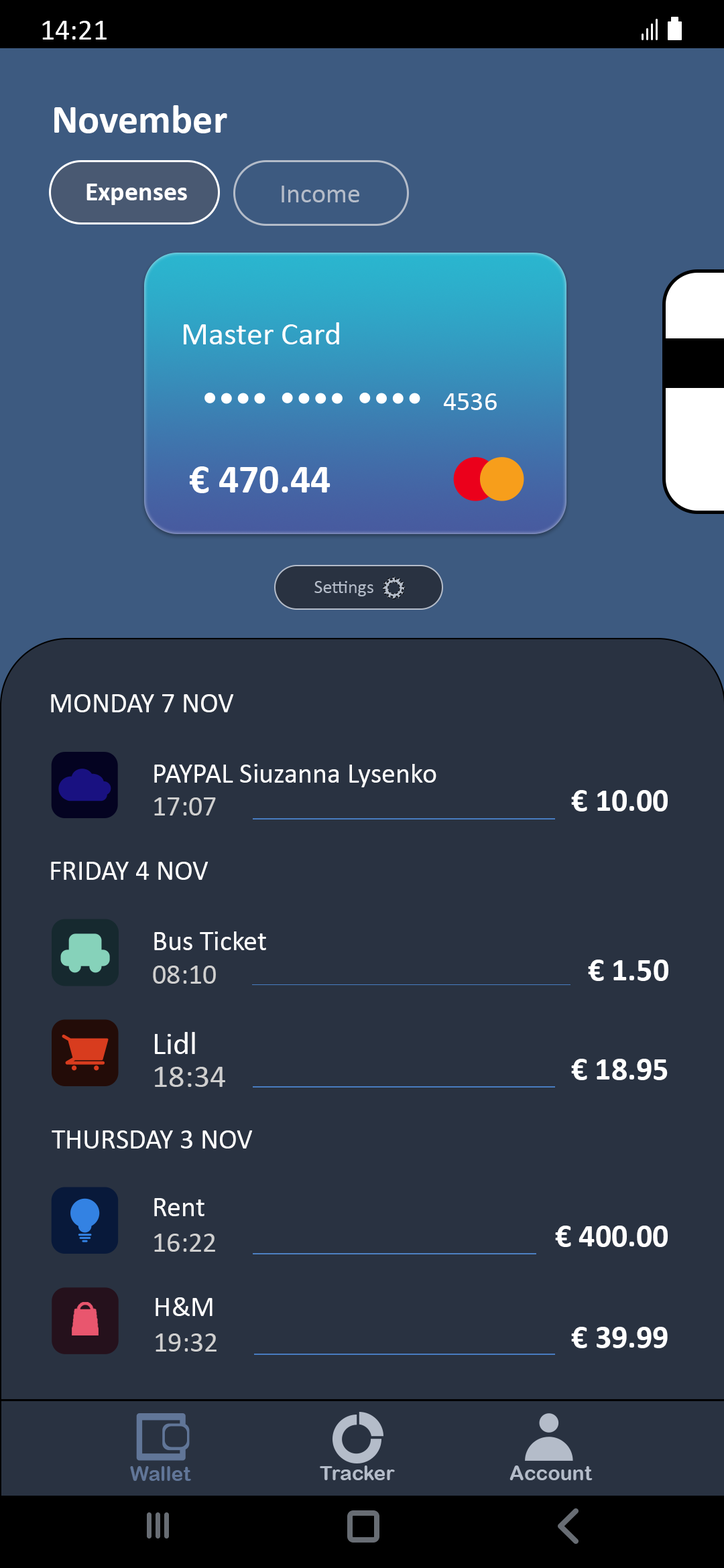
<style>
.page{position:relative;width:724px;height:1568px;background:#293241}
.page>*{position:absolute;margin:0}
.t1{font:29.5px "Calibri";color:#ffffff}
.t2{font:40.2px "Calibri-Bold";color:#ffffff}
.t3{font:26.8px "Calibri-Bold";color:#ffffff}
.t4{font:26.8px "Calibri";color:#b4bcc9}
.t5{font:32.2px "Calibri";color:#ffffff}
.t6{font:26.8px "Calibri";color:#ffffff}
.t7{font:18.8px "Calibri";color:#b4bcc9}
.t8{font:28.1px "Calibri";color:#ffffff}
.t9{font:28.1px "Calibri";color:#cfcfcf}
.t10{font:32.2px "Calibri-Bold";color:#ffffff}
.t11{font:32.2px "Calibri";color:#cfcfcf}
.t12{font:20.1px "ArialRoundedMTBold";color:#617698}
.t13{font:20.1px "ArialRoundedMTBold";color:#b4bcc9}
</style>
<div class="page">
<p class="t1" style="left:42px;top:21px;width:65px;height:19px">14:21</p>
<p class="t2" style="left:54px;top:105px;width:173px;height:28px">November</p>
<p class="t3" style="left:86px;top:184px;width:101px;height:21px">Expenses</p>
<p class="t4" style="left:281px;top:186px;width:78px;height:16px">Income</p>
<p class="t5" style="left:184px;top:322px;width:155px;height:22px">Master Card</p>
<p class="t6" style="left:443px;top:393px;width:54px;height:17px">4536</p>
<p class="t2" style="left:189px;top:466px;width:141px;height:27px">€ 470.44</p>
<p class="t7" style="left:314px;top:581px;width:59px;height:15px">Settings</p>
<p class="t8" style="left:51px;top:694px;width:183px;height:18px">MONDAY 7 NOV</p>
<p class="t8" style="left:154px;top:764px;width:282px;height:23px">PAYPAL Siuzanna Lysenko</p>
<p class="t9" style="left:154px;top:797px;width:62px;height:18px">17:07</p>
<p class="t10" style="left:571px;top:790px;width:96px;height:21px">€ 10.00</p>
<p class="t8" style="left:51px;top:862px;width:157px;height:18px">FRIDAY 4 NOV</p>
<p class="t8" style="left:154px;top:931px;width:112px;height:19px">Bus Ticket</p>
<p class="t9" style="left:153px;top:966px;width:63px;height:18px">08:10</p>
<p class="t10" style="left:588px;top:960px;width:80px;height:21px">€ 1.50</p>
<p class="t5" style="left:155px;top:1032px;width:40px;height:22px">Lidl</p>
<p class="t10" style="left:571px;top:1059px;width:96px;height:21px">€ 18.95</p>
<p class="t11" style="left:155px;top:1067px;width:70px;height:20px">18:34</p>
<p class="t8" style="left:52px;top:1130px;width:201px;height:19px">THURSDAY 3 NOV</p>
<p class="t8" style="left:154px;top:1198px;width:50px;height:18px">Rent</p>
<p class="t10" style="left:555px;top:1226px;width:112px;height:21px">€ 400.00</p>
<p class="t9" style="left:154px;top:1234px;width:61px;height:18px">16:22</p>
<p class="t8" style="left:155px;top:1297px;width:57px;height:19px">H&amp;M</p>
<p class="t9" style="left:155px;top:1333px;width:61px;height:19px">19:32</p>
<p class="t10" style="left:571px;top:1327px;width:96px;height:21px">€ 39.99</p>
<p class="t12" style="left:130px;top:1466px;width:61px;height:15px">Wallet</p>
<p class="t13" style="left:320px;top:1465px;width:75px;height:15px">Tracker</p>
<p class="t13" style="left:509px;top:1465px;width:83px;height:15px">Account</p>
</div>
